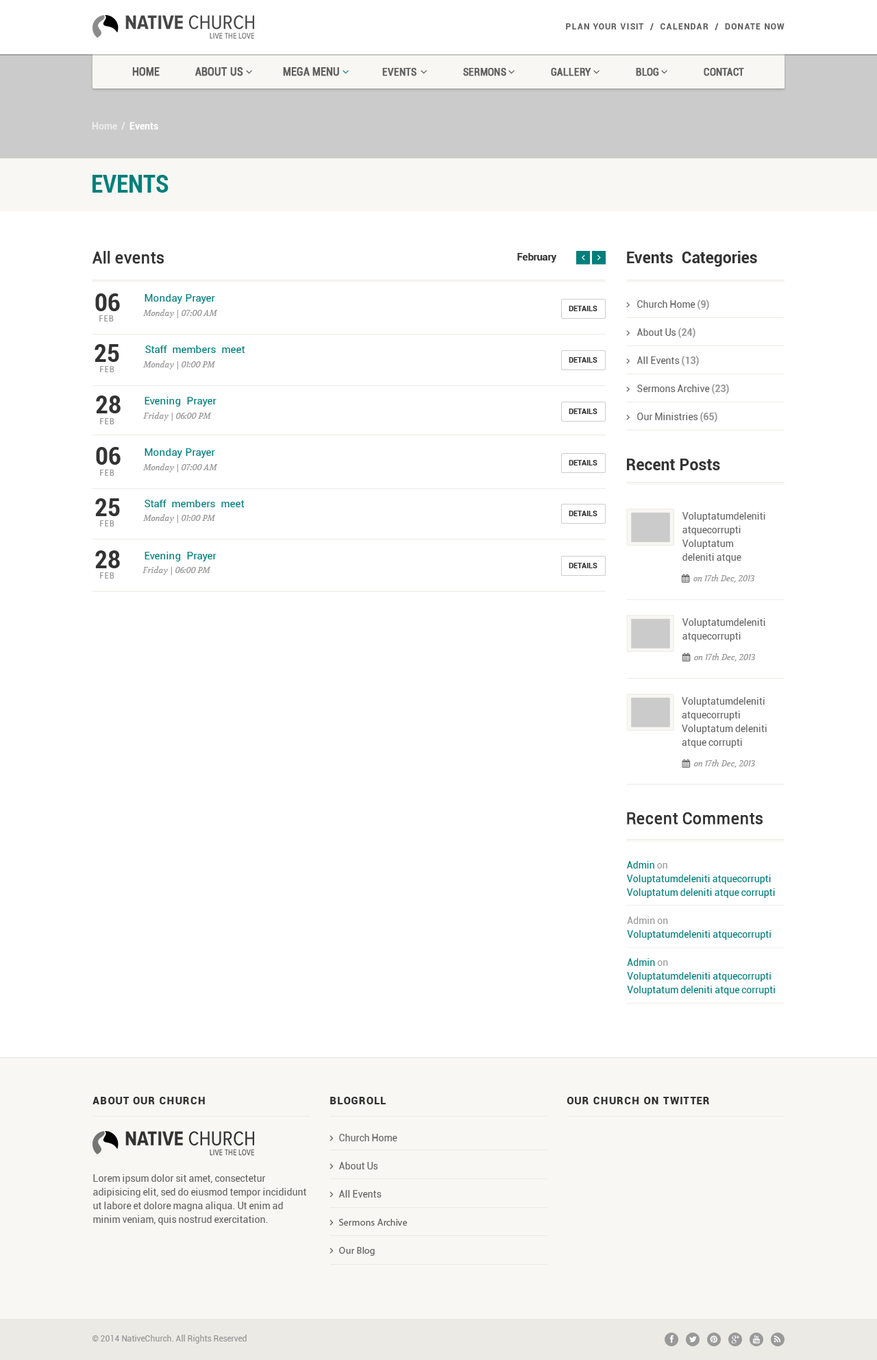
<style>
.page{position:relative;width:877px;height:1360px;background:#ffffff}
.page>*{position:absolute;margin:0}
.t1{font:8.2px "Roboto-Bold";letter-spacing:0.1em;color:#5e5e5e}
.t2{font:9.6px "Roboto-Bold";color:#ebebeb}
.t3{font:9.6px "Roboto-Bold";color:#ffffff}
.t4{font:24.7px "Roboto-BoldCondensed";color:#007f7b;text-transform:uppercase}
.t5{font:15.8px "Roboto-Regular";color:#333333;font-weight:bold}
.t6{font:10.3px "Roboto-Bold";color:#333333}
.t7{font:15.8px "Roboto-Bold";color:#333333}
.t8{font:24.7px "Roboto-BoldCondensed";color:#333333}
.t9{font:10.3px "Roboto-Regular";color:#007f7b}
.t10{font:7.5px "Roboto-Bold";color:#333333}
.t11{font:9.6px "Roboto-Regular";color:#666666}
.t12{font:9.6px "Roboto-Bold";color:#999999}
.t13{font:8.2px "Roboto-Condensed";letter-spacing:0.1em;color:#999999}
.t14{font:8.2px "Volkhov-Italic";color:#999999}
.t15{font:9.6px/13.7px "Roboto-Regular";color:#666666}
.t16{font:9.6px/13.7px "Roboto-Regular";color:#007f7b}
.t17{font:9.6px/12.3px "Roboto-Regular";color:#007f7b}
.t18{font:9.6px/12.3px "Roboto-Regular";color:#999999}
.t19{font:10.3px "Roboto-Black";letter-spacing:0.075em;color:#333333}
.t20{font:8.2px "Roboto-Regular";color:#999999}
</style>
<div class="page">
<p class="t1" style="left:566px;top:23px;width:219px;height:7px">PLAN YOUR VISIT  /  CALENDAR  /  DONATE NOW</p>
<p class="t2" style="left:92px;top:122px;width:66px;height:8px">Home  /  <span class="t3">Events</span></p>
<p class="t4" style="left:93px;top:175px;width:76px;height:18px">Events</p>
<p class="t5" style="left:93px;top:251px;width:71px;height:13px">All events</p>
<p class="t6" style="left:517px;top:253px;width:39px;height:9px">February</p>
<p class="t7" style="left:627px;top:251px;width:130px;height:16px">Events  Categories</p>
<p class="t8" style="left:95px;top:293px;width:25px;height:18px">06</p>
<p class="t9" style="left:145px;top:294px;width:70px;height:10px">Monday Prayer</p>
<p class="t10" style="left:569px;top:306px;width:29px;height:5px">DETAILS</p>
<p class="t11" style="left:637px;top:299px;width:72px;height:11px">Church Home <span class="t12">(9)</span></p>
<p class="t13" style="left:99px;top:315px;width:15px;height:6px">FEB</p>
<p class="t14" style="left:143px;top:309px;width:75px;height:9px">Monday | 07:00 AM</p>
<p class="t11" style="left:637px;top:328px;width:59px;height:10px">About Us <span class="t12">(24)</span></p>
<p class="t8" style="left:95px;top:344px;width:24px;height:18px">25</p>
<p class="t9" style="left:145px;top:345px;width:100px;height:8px">Staff  members  meet</p>
<p class="t13" style="left:100px;top:366px;width:14px;height:6px">FEB</p>
<p class="t14" style="left:143px;top:360px;width:73px;height:9px">Monday | 01:00 PM</p>
<p class="t10" style="left:569px;top:357px;width:29px;height:5px">DETAILS</p>
<p class="t11" style="left:637px;top:356px;width:62px;height:10px">All Events <span class="t12">(13)</span></p>
<p class="t11" style="left:637px;top:384px;width:92px;height:10px">Sermons Archive <span class="t12">(23)</span></p>
<p class="t8" style="left:96px;top:395px;width:25px;height:18px">28</p>
<p class="t9" style="left:145px;top:397px;width:72px;height:9px">Evening  Prayer</p>
<p class="t14" style="left:143px;top:412px;width:69px;height:9px">Friday | 06:00 PM</p>
<p class="t10" style="left:569px;top:408px;width:29px;height:6px">DETAILS</p>
<p class="t11" style="left:637px;top:412px;width:80px;height:10px">Our Ministries <span class="t12">(65)</span></p>
<p class="t13" style="left:100px;top:418px;width:14px;height:6px">FEB</p>
<p class="t8" style="left:96px;top:447px;width:25px;height:18px">06</p>
<p class="t9" style="left:145px;top:448px;width:70px;height:10px">Monday Prayer</p>
<p class="t10" style="left:569px;top:460px;width:29px;height:5px">DETAILS</p>
<p class="t7" style="left:627px;top:458px;width:93px;height:12px">Recent Posts</p>
<p class="t13" style="left:100px;top:469px;width:14px;height:7px">FEB</p>
<p class="t14" style="left:143px;top:463px;width:75px;height:9px">Monday | 07:00 AM</p>
<p class="t8" style="left:95px;top:498px;width:25px;height:18px">25</p>
<p class="t9" style="left:145px;top:500px;width:100px;height:7px">Staff  members  meet</p>
<p class="t13" style="left:100px;top:520px;width:14px;height:6px">FEB</p>
<p class="t14" style="left:143px;top:514px;width:73px;height:9px">Monday | 01:00 PM</p>
<p class="t10" style="left:569px;top:511px;width:29px;height:5px">DETAILS</p>
<p class="t15" style="left:682px;top:512px;width:83px;height:51px">Voluptatumdeleniti atquecorrupti<br>Voluptatum deleniti atque corrupti</p>
<p class="t8" style="left:95px;top:550px;width:25px;height:18px">28</p>
<p class="t9" style="left:145px;top:552px;width:72px;height:9px">Evening  Prayer</p>
<p class="t14" style="left:143px;top:566px;width:68px;height:9px">Friday | 06:00 PM</p>
<p class="t10" style="left:569px;top:563px;width:29px;height:5px">DETAILS</p>
<p class="t13" style="left:100px;top:572px;width:14px;height:6px">FEB</p>
<p class="t15" style="left:682px;top:618px;width:83px;height:23px">Voluptatumdeleniti atquecorrupti</p>
<p class="t15" style="left:682px;top:697px;width:85px;height:51px">Voluptatumdeleniti atquecorrupti<br>Voluptatum deleniti atque corrupti</p>
<p class="t5" style="left:627px;top:812px;width:136px;height:12px">Recent Comments</p>
<p class="t16" style="left:627px;top:861px;width:148px;height:37px"><span class="t17">Admin </span><span class="t18">on<br></span>Voluptatumdeleniti atquecorrupti<br>Voluptatum deleniti atque corrupti</p>
<p class="t16" style="left:627px;top:916px;width:144px;height:23px"><span class="t18">Admin on<br></span>Voluptatumdeleniti atquecorrupti</p>
<p class="t16" style="left:627px;top:958px;width:148px;height:37px"><span class="t17">Admin </span><span class="t18">on<br></span>Voluptatumdeleniti atquecorrupti<br>Voluptatum deleniti atque corrupti</p>
<p class="t19" style="left:93px;top:1096px;width:112px;height:8px">ABOUT OUR CHURCH</p>
<p class="t19" style="left:330px;top:1096px;width:56px;height:8px">BLOGROLL</p>
<p class="t19" style="left:567px;top:1096px;width:142px;height:8px">OUR CHURCH ON TWITTER</p>
<p class="t15" style="left:93px;top:1174px;width:213px;height:51px">Lorem ipsum dolor sit amet, consectetur adipisicing elit, sed do eiusmod tempor incididunt ut labore et dolore magna aliqua. Ut enim ad minim veniam, quis nostrud exercitation.</p>
<p class="t20" style="left:92px;top:1334px;width:155px;height:9px">© 2014 NativeChurch. All Rights Reserved</p>
</div>
